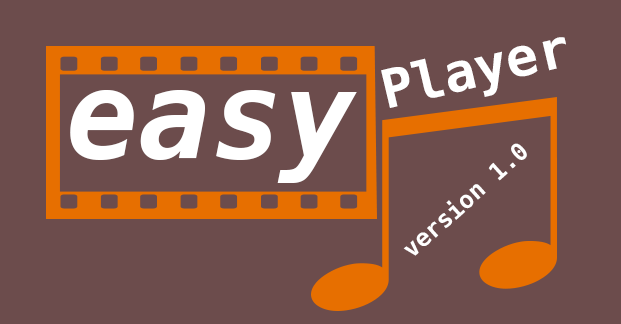
<style>
.page{position:relative;width:621px;height:324px;background:#6c4c4c}
.page>*{position:absolute;margin:0}
.t1{font:53.2px "BitstreamVeraSansMono-Bold";color:#ffffff}
.t2{font:120px "BitstreamVeraSansMono-BoldOb";color:#ffffff}
.t3{font:24px "BitstreamVeraSansMono-Bold";color:#ffffff}
</style>
<div class="page">
<p class="t1" style="left:381px;top:37px;width:185px;height:71px;rotate:-13deg">Player</p>
<p class="t2" style="left:70px;top:90px;width:287px;height:93px">easy</p>
<p class="t3" style="left:403px;top:143px;width:124px;height:113px;rotate:-42deg">version 1.0</p>
</div>
